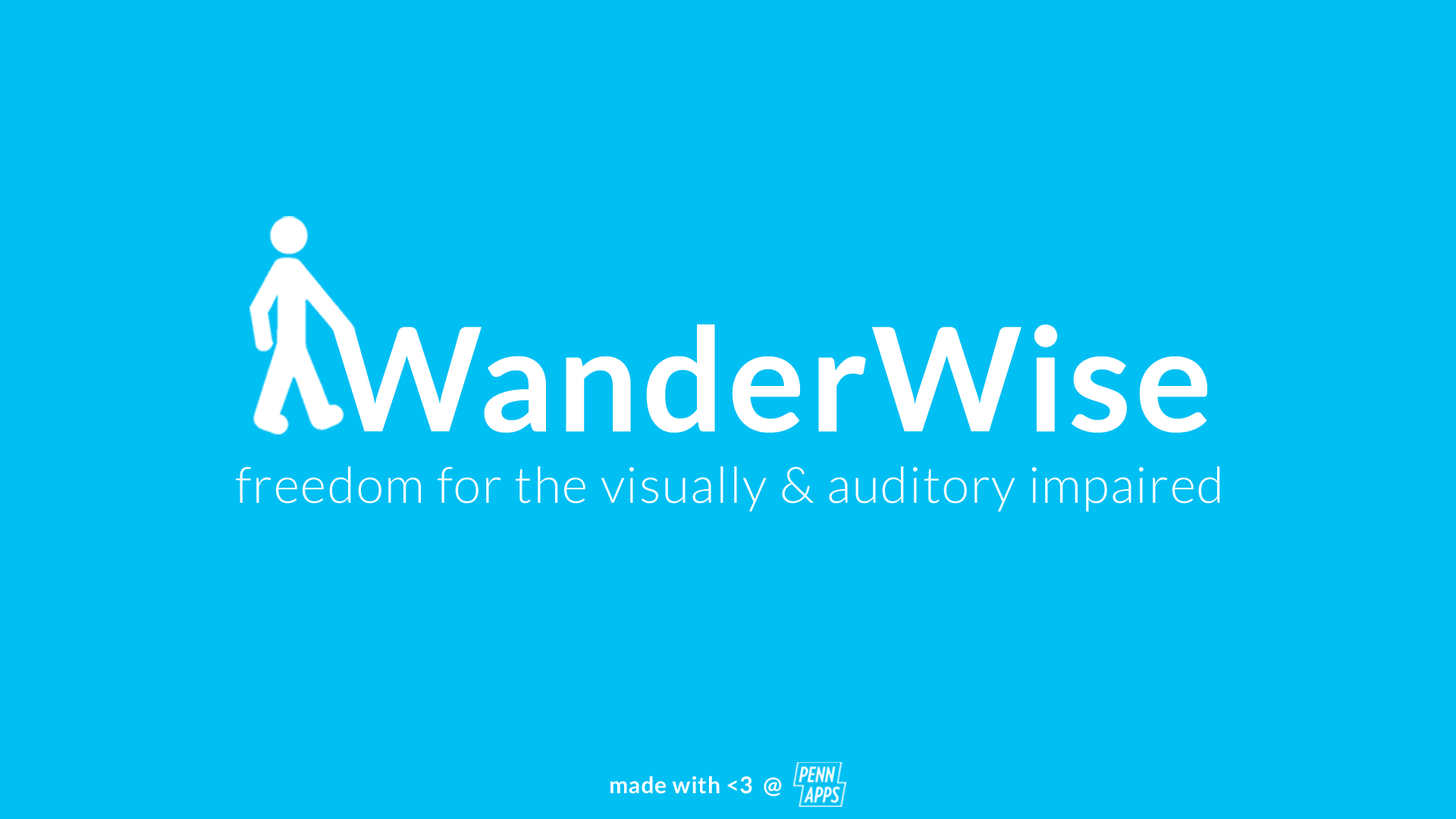
<style>
.page{position:relative;width:1456px;height:819px;background:#00bff3}
.page>*{position:absolute;margin:0}
.t1{font:144.1px "Lato-Bold";letter-spacing:0.025em;color:#ffffff}
.t2{font:50px "Lato-Light";letter-spacing:0.025em;color:#ffffff}
.t3{font:22.7px "Lato-Bold";letter-spacing:0.025em;color:#ffffff}
</style>
<div class="page">
<p class="t1" style="left:332px;top:324px;width:876px;height:109px">WanderWise</p>
<p class="t2" style="left:236px;top:466px;width:984px;height:46px">freedom for the visually &amp; auditory impaired</p>
<p class="t3" style="left:610px;top:776px;width:172px;height:20px">made with &lt;3  @</p>
</div>
